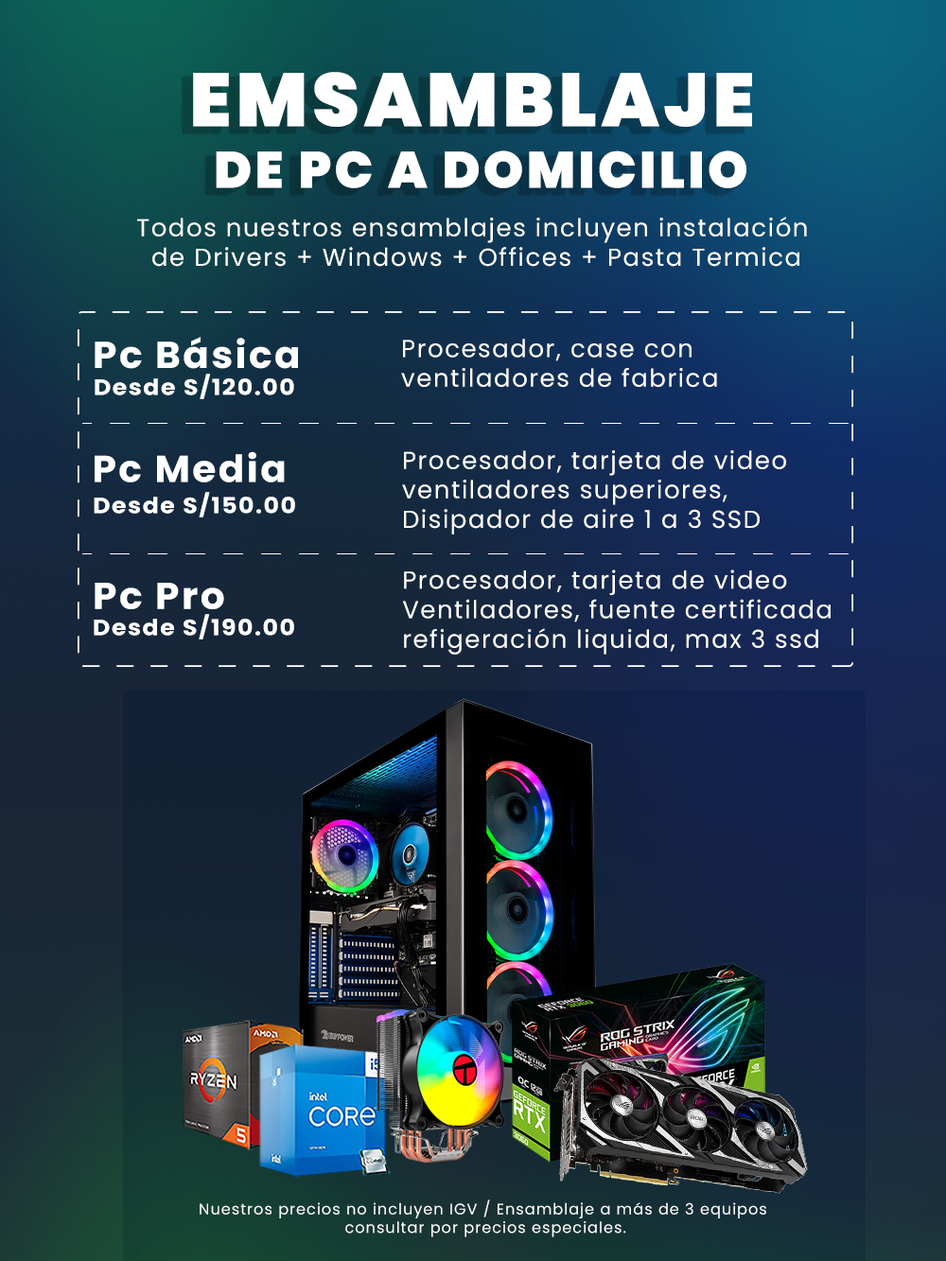
<style>
.page{position:relative;width:946px;height:1261px}
.page>*{position:absolute;margin:0}
.t1{font:51.2px "Poppins-Black";letter-spacing:0.06em;color:#ffffff}
.t2{font:75.3px "Poppins-Black";letter-spacing:0.06em;color:#ffffff}
.t3{font:24.6px "Poppins-Regular";letter-spacing:0.06em;color:#ffffff}
.t4{font:37.4px "Poppins-Bold";letter-spacing:0.06em;color:#ffffff;scale:1.03 1}
.t5{font:22.1px "Poppins-Bold";letter-spacing:0.06em;color:#ffffff;scale:1.08 1}
.t6{font:15.3px "Poppins-Regular";letter-spacing:0.06em;color:#ffffff}
</style>
<div class="page">
<p class="t1" style="left:193px;top:72px;width:559px;height:116px;text-align:center"><span class="t2">EMSAMBLAJE <br></span>DE PC A DOMICILIO</p>
<p class="t3" style="left:137px;top:217px;width:670px;height:50px;text-align:center">Todos nuestros ensamblajes incluyen instalación <br>de Drivers + Windows + Offices + Pasta Termica</p>
<p class="t4" style="left:95px;top:337px;width:203px;height:32px">Pc Básica</p>
<p class="t3" style="left:401px;top:339px;width:316px;height:48px">Procesador, case con<br>ventiladores de fabrica</p>
<p class="t5" style="left:95px;top:374px;width:199px;height:25px">Desde S/120.00</p>
<p class="t4" style="left:95px;top:451px;width:190px;height:31px">Pc Media</p>
<p class="t3" style="left:402px;top:450px;width:384px;height:84px">Procesador, tarjeta de video <br>ventiladores superiores, <br>Disipador de aire 1 a 3 SSD</p>
<p class="t5" style="left:94px;top:492px;width:201px;height:25px">Desde S/150.00</p>
<p class="t3" style="left:403px;top:569px;width:427px;height:85px">Procesador, tarjeta de video <br>Ventiladores, fuente certificada <br>refigeración liquida, max 3 ssd</p>
<p class="t4" style="left:95px;top:583px;width:129px;height:26px">Pc Pro</p>
<p class="t5" style="left:94px;top:614px;width:200px;height:25px">Desde S/190.00</p>
<p class="t6" style="left:200px;top:1199px;width:566px;height:38px;text-align:center">Nuestros precios no incluyen IGV / Ensamblaje a más de 3 equipos <br>consultar por precios especiales.</p>
</div>
